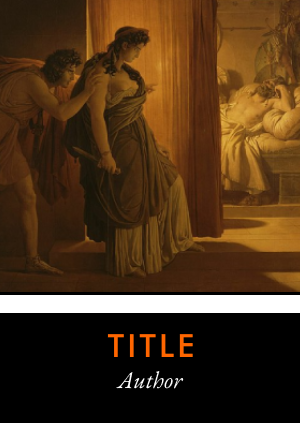
<style>
.page{position:relative;width:300px;height:423px;background:#000000}
.page>*{position:absolute;margin:0}
.t1{font:32px "FuturaBT-Medium";letter-spacing:0.1em;color:#ff6600}
.t2{font:24px "EBGaramond-Italic";color:#ffffff}
</style>
<div class="page">
<p class="t1" style="left:107px;top:334px;width:86px;height:23px">TITLE</p>
<p class="t2" style="left:116px;top:371px;width:68px;height:18px">Author</p>
</div>
